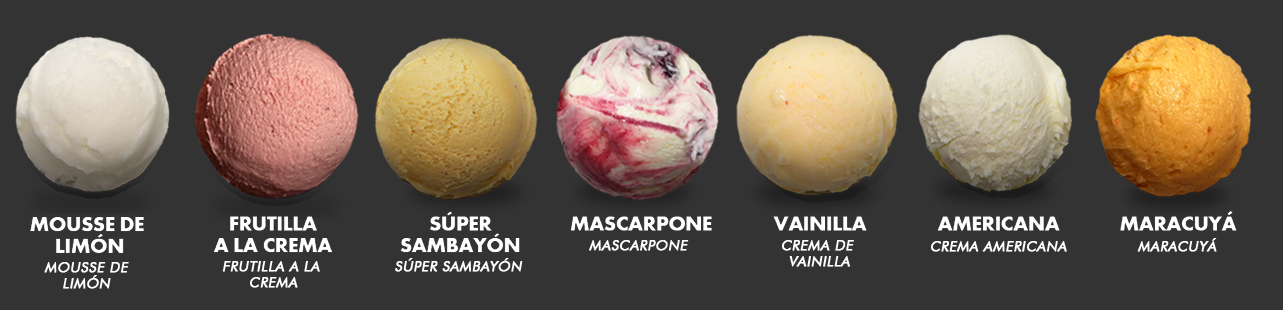
<style>
.page{position:relative;width:1283px;height:310px;background:#333333}
.page>*{position:absolute;margin:0}
.t1{font:14px "FuturaBT-Book";letter-spacing:0.02em;color:#ffffff;text-transform:uppercase;font-weight:bold;font-style:italic}
</style>
<div class="page">
<p class="t1" style="left:589px;top:240px;width:100px;height:11px">mascarpone</p>
<p class="t1" style="left:782px;top:240px;width:72px;height:27px;text-align:center">Crema de <br>vainilla</p>
<p class="t1" style="left:931px;top:241px;width:136px;height:11px">Crema americana</p>
<p class="t1" style="left:1137px;top:238px;width:80px;height:14px">maracuyá</p>
<p class="t1" style="left:44px;top:262px;width:85px;height:27px;text-align:center">Mousse de<br>limón</p>
<p class="t1" style="left:222px;top:261px;width:98px;height:27px;text-align:center">frutilla a la <br>crema</p>
<p class="t1" style="left:395px;top:258px;width:128px;height:14px">súper sambayón</p>
</div>
